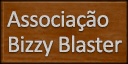
<style>
.page{position:relative;width:128px;height:64px}
.page>*{position:absolute;margin:0}
.t1{font:24px/25.3px "Calibri";letter-spacing:-0.02em;color:#cfcccb}
</style>
<div class="page">
<p class="t1" style="left:7px;top:10px;width:115px;height:47px">Associação<br>Bizzy Blaster</p>
</div>
